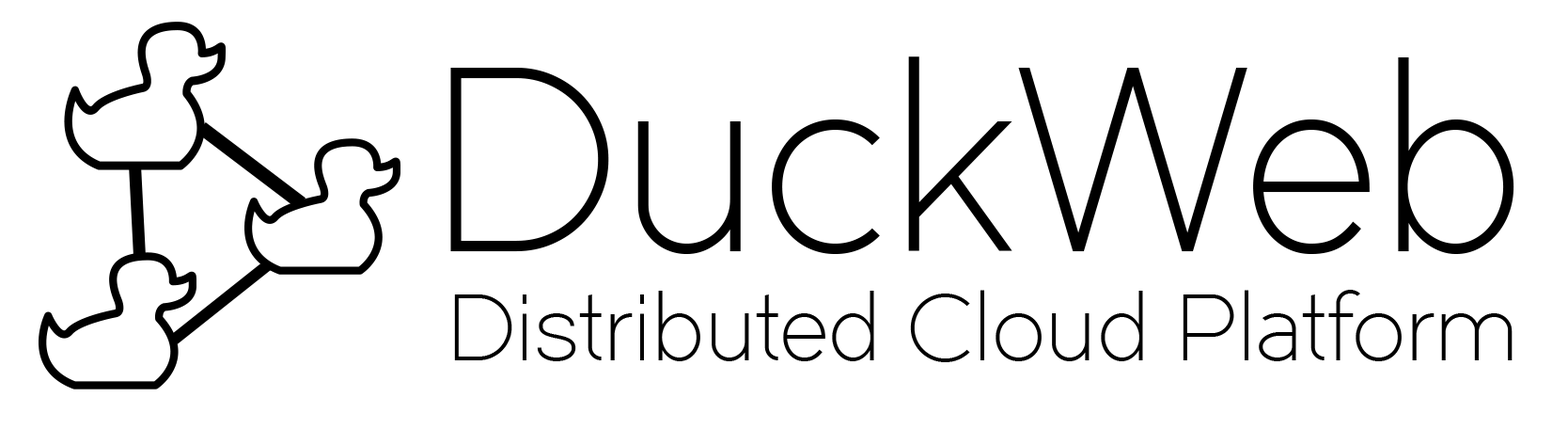
<style>
.page{position:relative;width:1568px;height:429px;background:#ffffff}
.page>*{position:absolute;margin:0}
.t1{font:258.5px "Dual-300";color:#000000}
.t2{font:93.2px "Dual-300";color:#000000}
</style>
<div class="page">
<p class="t1" style="left:450px;top:56px;width:1064px;height:198px">DuckWeb</p>
<p class="t2" style="left:454px;top:290px;width:1059px;height:72px">Distributed Cloud Platform</p>
</div>
